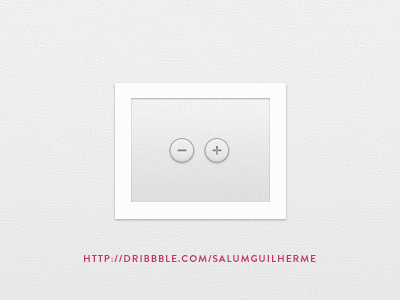
<style>
.page{position:relative;width:400px;height:300px}
.page>*{position:absolute;margin:0}
.t1{font:10px "BrandonGrotesque-Bold";letter-spacing:0.1em;color:#c2346a;text-transform:uppercase}
</style>
<div class="page">
<p class="t1" style="left:84px;top:255px;width:232px;height:7px">http://dribbble.com/salumguilherme</p>
</div>
